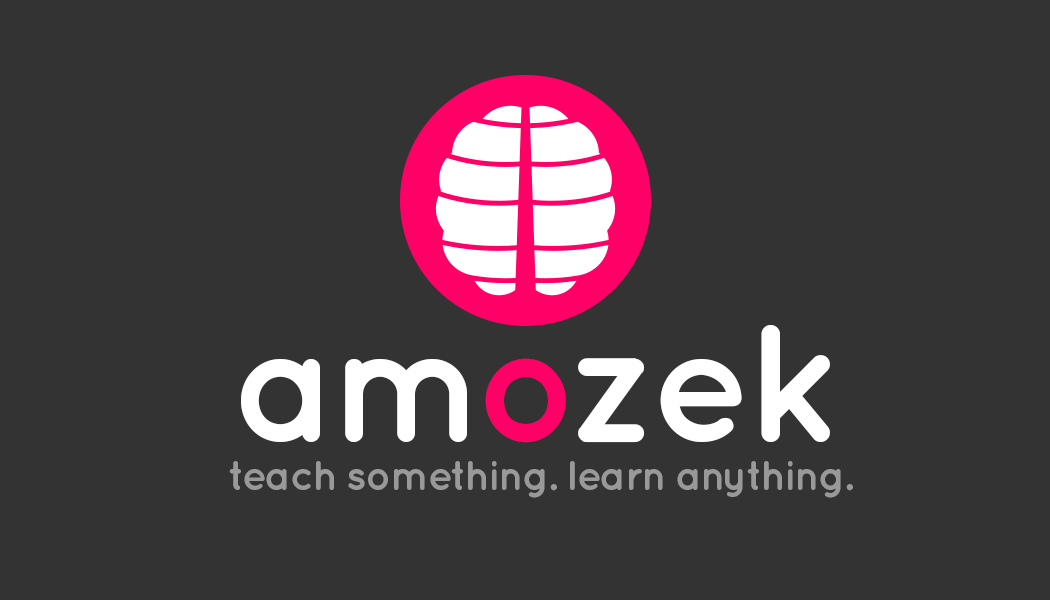
<style>
.page{position:relative;width:1050px;height:600px;background:#333333}
.page>*{position:absolute;margin:0}
.t1{font:166.7px "Quicksand-Bold";letter-spacing:-0.04em;color:#ffffff}
.t2{font:166.7px "Quicksand-Bold";letter-spacing:-0.09em;color:#ffffff}
.t3{font:166.7px "Quicksand-Bold";letter-spacing:-0.04em;color:#ff0066}
.t4{font:41.7px "Quicksand-Bold";letter-spacing:-0.04em;color:#999999}
</style>
<div class="page">
<p class="t1" style="left:241px;top:325px;width:589px;height:118px">a<span class="t2">m</span><span class="t3">o</span>zek</p>
<p class="t4" style="left:229px;top:461px;width:624px;height:37px">teach something. learn anything.</p>
</div>
